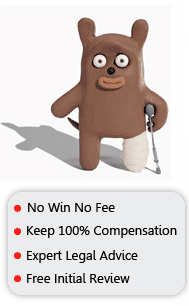
<style>
.page{position:relative;width:189px;height:306px;background:#ebecee}
.page>*{position:absolute;margin:0}
.t1{font:13px "Leelawadee";color:#000000}
</style>
<div class="page">
<p class="t1" style="left:28px;top:202px;width:87px;height:10px">No Win No Fee</p>
<p class="t1" style="left:27px;top:225px;width:150px;height:13px">Keep 100% Compensation</p>
<p class="t1" style="left:27px;top:250px;width:111px;height:13px">Expert Legal Advice</p>
<p class="t1" style="left:27px;top:273px;width:103px;height:10px">Free Initial Review</p>
</div>
